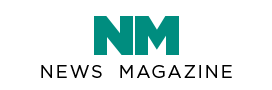
<style>
.page{position:relative;width:272px;height:90px;background:#ffffff}
.page>*{position:absolute;margin:0}
.t1{font:18px "Gotham-Book";letter-spacing:0.1em;color:#000000;text-transform:uppercase}
</style>
<div class="page">
<p class="t1" style="left:41px;top:65px;width:191px;height:13px">News  magazine</p>
</div>
